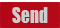
<style>
.page{position:relative;width:60px;height:28px}
.page>*{position:absolute;margin:0}
.t1{font:19.6px "Impact";color:#cdcdcd;scale:0.89 1}
</style>
<div class="page">
<p class="t1" style="left:12px;top:7px;width:36px;height:16px">Send</p>
</div>
